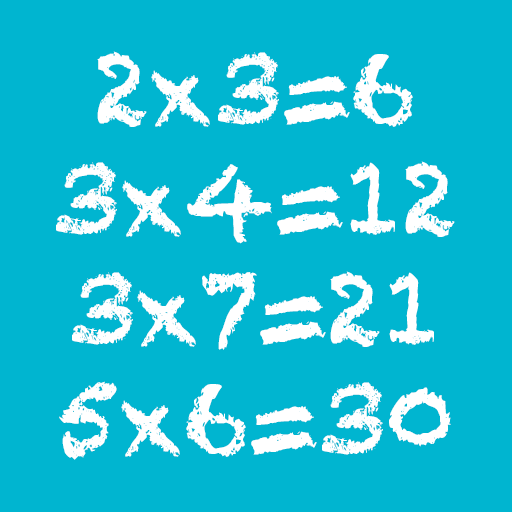
<style>
.page{position:relative;width:512px;height:512px;background:#00b5d0}
.page>*{position:absolute;margin:0}
.t1{font:100px/110px "Chalkduster";color:#ffffff}
</style>
<div class="page">
<p class="t1" style="left:56px;top:51px;width:399px;height:409px;text-align:center">2x3=6<br>3x4=12<br>3x7=21<br>5x6=30</p>
</div>
